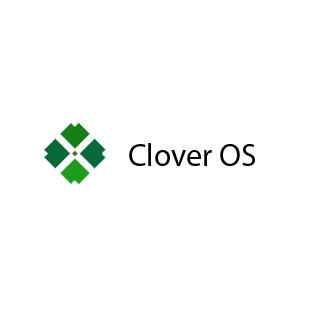
<style>
.page{position:relative;width:310px;height:310px;background:#ffffff}
.page>*{position:absolute;margin:0}
.t1{font:32px "MyriadPro-Regular";color:#000000}
</style>
<div class="page">
<p class="t1" style="left:129px;top:143px;width:126px;height:23px">Clover OS</p>
</div>
